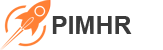
<style>
.page{position:relative;width:163px;height:50px;background:#ffffff}
.page>*{position:absolute;margin:0}
.t1{font:25px "Arial-BoldMT";color:#3b3b3b}
</style>
<div class="page">
<p class="t1" style="left:52px;top:16px;width:80px;height:18px">PIMHR</p>
</div>
